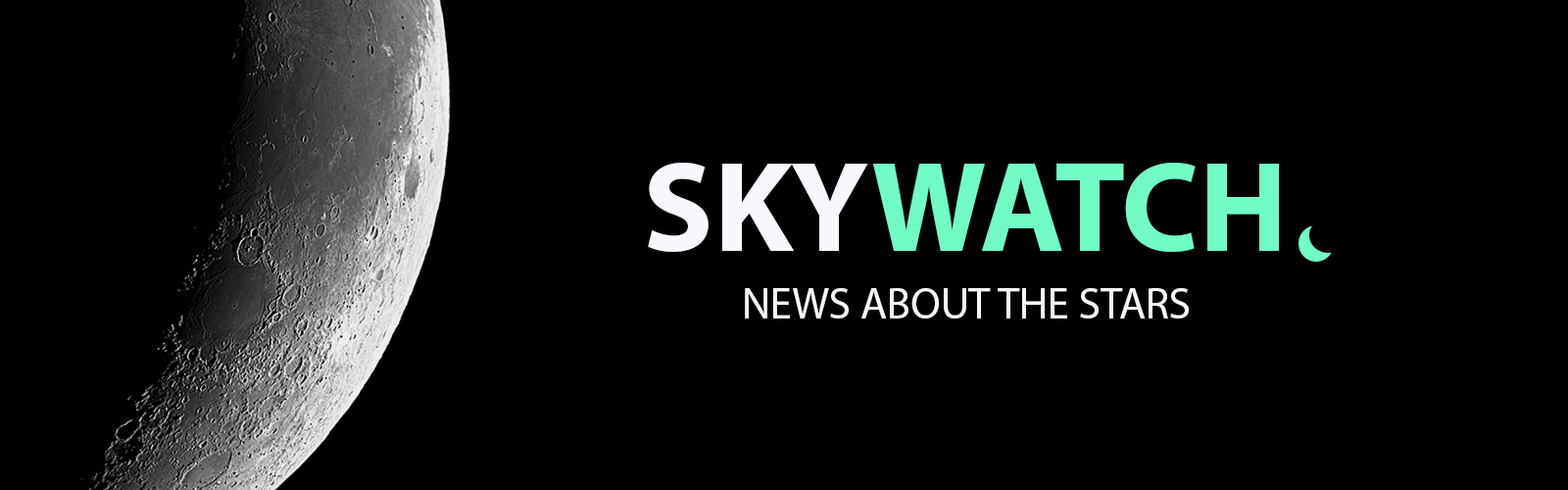
<style>
.page{position:relative;width:1568px;height:490px;background:#000000}
.page>*{position:absolute;margin:0}
.t1{font:129.7px "MyriadPro-Bold";color:#71fcc6}
.t2{font:129.7px "MyriadPro-Bold";color:#f7f8fd}
.t3{font:43.7px "MyriadPro-Regular";color:#f7f8fd}
</style>
<div class="page">
<p class="t1" style="left:648px;top:163px;width:631px;height:89px"><span class="t2">SKY</span>WATCH</p>
<p class="t3" style="left:745px;top:288px;width:444px;height:30px">NEWS ABOUT THE STARS</p>
</div>
